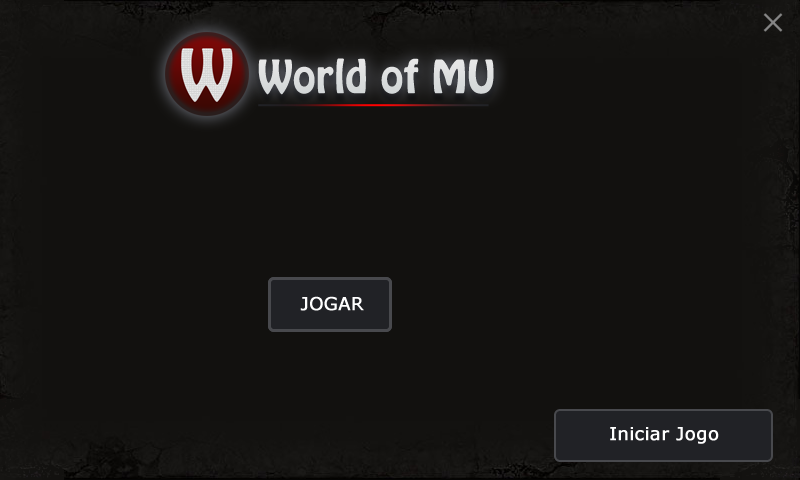
<style>
.page{position:relative;width:800px;height:480px;background:#12110f}
.page>*{position:absolute;margin:0}
.t1{font:40px "HoboStd";color:#dcdedf;font-weight:bold}
.t2{font:18px "Verdana";color:#ffffff;font-weight:bold}
</style>
<div class="page">
<p class="t1" style="left:258px;top:58px;width:236px;height:37px">World of MU</p>
<p class="t2" style="left:300px;top:296px;width:64px;height:15px">JOGAR</p>
</div>
